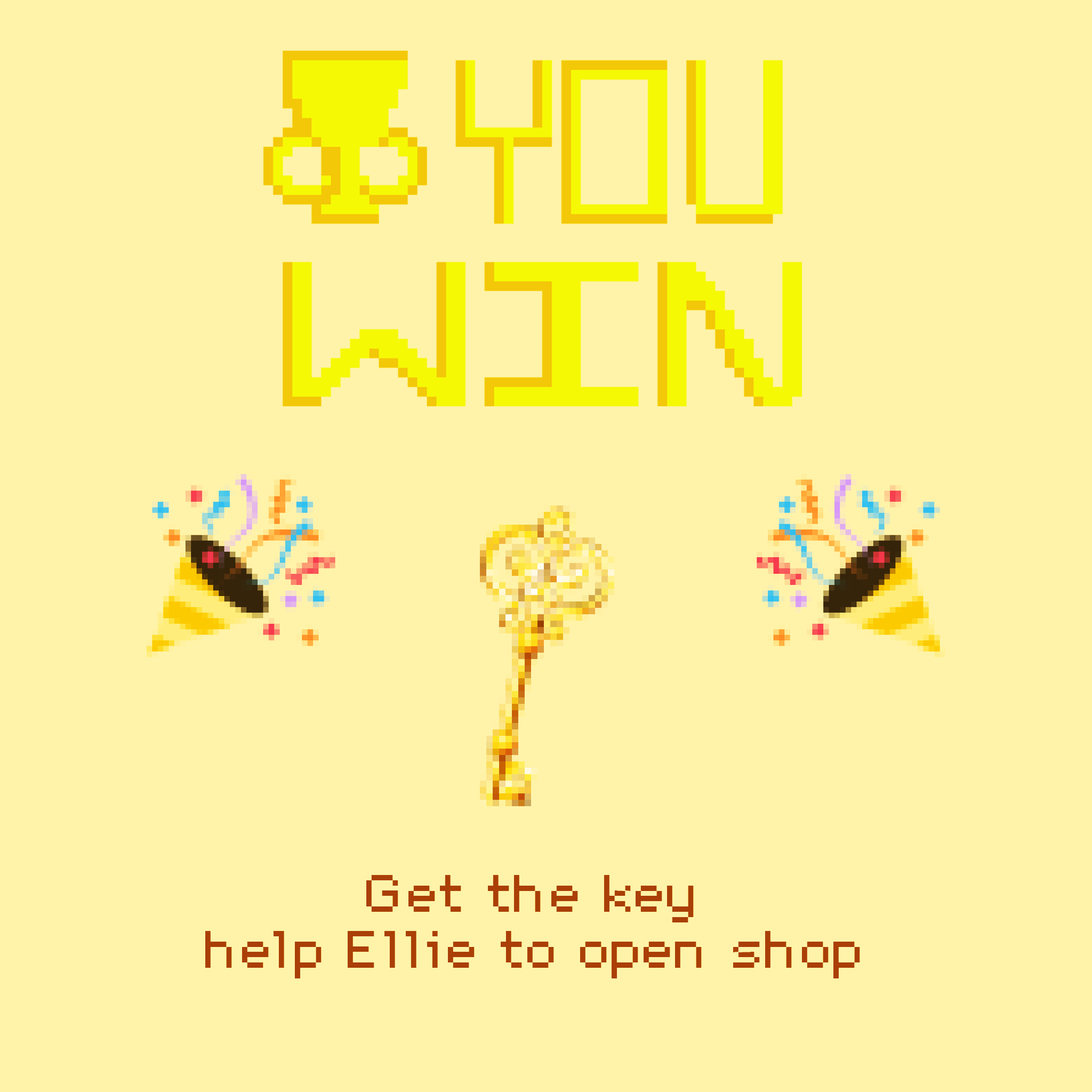
<style>
.page{position:relative;width:1092px;height:1092px;background:#fff3a9}
.page>*{position:absolute;margin:0}
.t1{font:46.6px "DePixel-Breit";color:#9c5210}
</style>
<div class="page">
<p class="t1" style="left:205px;top:875px;width:655px;height:103px;text-align:center">Get the key<br>help Ellie to open shop</p>
</div>
